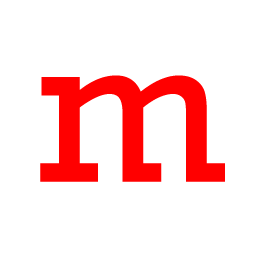
<style>
.page{position:relative;width:256px;height:256px;background:#ffffff}
.page>*{position:absolute;margin:0}
.t1{font:221.1px "Rockwell";letter-spacing:-0.05em;color:#ff0000}
</style>
<div class="page">
<p class="t1" style="left:40px;top:75px;width:185px;height:107px">m</p>
</div>
